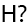
<style>
.page{position:relative;width:28px;height:28px;background:#ffffff}
.page>*{position:absolute;margin:0}
.t1{font:24px "Ubuntu";color:#000000}
</style>
<div class="page">
<p class="t1" style="left:2px;top:5px;width:25px;height:17px">H?</p>
</div>
